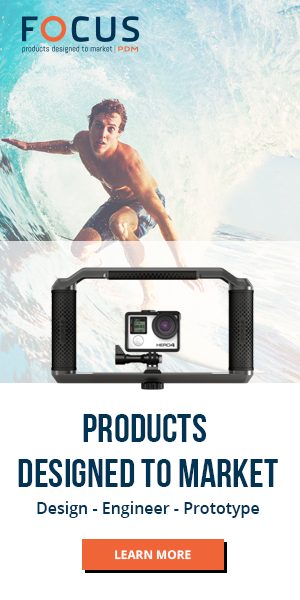
<style>
.page{position:relative;width:300px;height:600px;background:#ffffff}
.page>*{position:absolute;margin:0}
.t1{font:40px/44.8px "BebasNeueBold";color:#003354;text-transform:uppercase}
.t2{font:16px "OpenSans-Semibold";color:#003354}
.t3{font:12px "OpenSans-Bold";color:#ffffff}
</style>
<div class="page">
<p class="t1" style="left:18px;top:414px;width:260px;height:73px;text-align:center">products <br>designed to market</p>
<p class="t2" style="left:37px;top:501px;width:223px;height:17px">Design - Engineer - Prototype</p>
<p class="t3" style="left:115px;top:550px;width:76px;height:10px">LEARN MORE</p>
</div>
